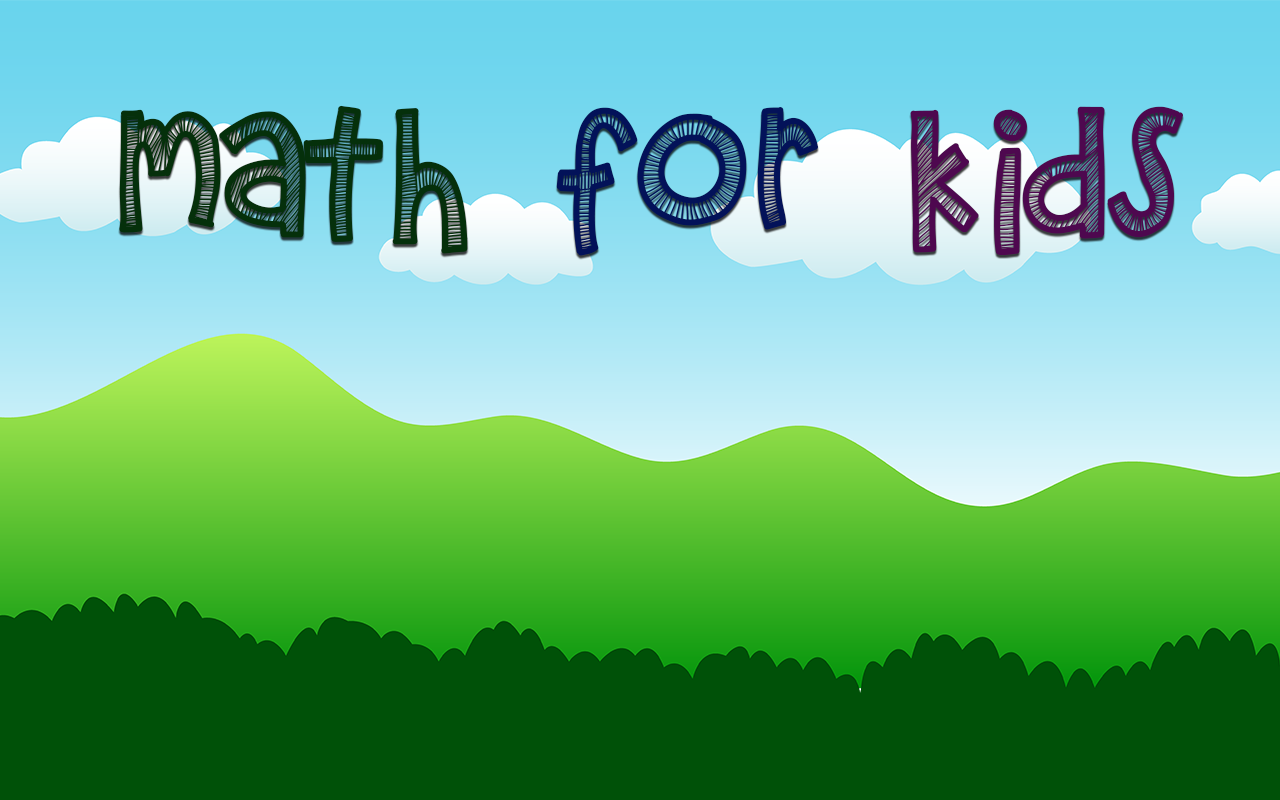
<style>
.page{position:relative;width:1280px;height:800px}
.page>*{position:absolute;margin:0}
.t1{font:150px "KBZipaDeeDooDah";color:#05300b}
.t2{font:150px "KBZipaDeeDooDah";color:#031259}
.t3{font:150px "KBZipaDeeDooDah";color:#4e084f}
</style>
<div class="page">
<p class="t1" style="left:119px;top:105px;width:1064px;height:151px">MATH  <span class="t2">FOR  </span><span class="t3">KIDS</span></p>
</div>
